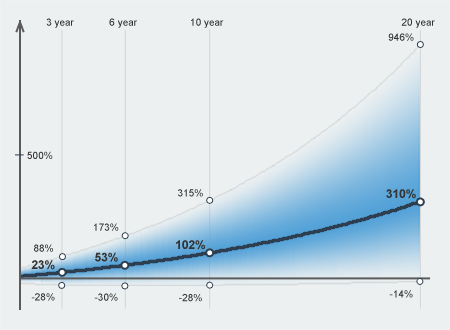
<style>
.page{position:relative;width:450px;height:330px;background:#ecf0f1}
.page>*{position:absolute;margin:0}
.t1{font:10px "ArialMT";color:#333333}
.t2{font:12px "Arial-BoldMT";color:#333333}
</style>
<div class="page">
<p class="t1" style="left:46px;top:18px;width:28px;height:10px">3 year</p>
<p class="t1" style="left:109px;top:18px;width:28px;height:10px">6 year</p>
<p class="t1" style="left:191px;top:18px;width:33px;height:10px">10 year</p>
<p class="t1" style="left:401px;top:18px;width:34px;height:10px">20 year</p>
<p class="t1" style="left:388px;top:33px;width:26px;height:8px">946%</p>
<p class="t1" style="left:27px;top:151px;width:26px;height:8px">500%</p>
<p class="t1" style="left:178px;top:189px;width:25px;height:8px">315%</p>
<p class="t2" style="left:386px;top:189px;width:30px;height:10px">310%</p>
<p class="t1" style="left:94px;top:223px;width:25px;height:8px">173%</p>
<p class="t1" style="left:34px;top:244px;width:19px;height:8px">88%</p>
<p class="t2" style="left:176px;top:240px;width:29px;height:10px">102%</p>
<p class="t2" style="left:95px;top:252px;width:23px;height:10px">53%</p>
<p class="t2" style="left:31px;top:260px;width:24px;height:10px">23%</p>
<p class="t1" style="left:31px;top:293px;width:24px;height:8px">-28%</p>
<p class="t1" style="left:94px;top:293px;width:24px;height:8px">-30%</p>
<p class="t1" style="left:179px;top:294px;width:23px;height:8px">-28%</p>
<p class="t1" style="left:389px;top:290px;width:24px;height:8px">-14%</p>
</div>
